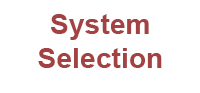
<style>
.page{position:relative;width:200px;height:93px;background:#ffffff}
.page>*{position:absolute;margin:0}
.t1{font:27.9px "Arial-BoldMT";color:#a24242}
</style>
<div class="page">
<p class="t1" style="left:38px;top:14px;width:124px;height:54px;text-align:center">System<br>Selection</p>
</div>
